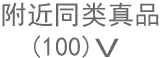
<style>
.page{position:relative;width:161px;height:58px;background:#ffffff}
.page>*{position:absolute;margin:0}
.t1{font:26.6px "SimHei";color:#686868;text-transform:uppercase}
.t2{font:26.7px "004-CAI978";color:#686868;text-transform:uppercase;scale:2 1}
</style>
<div class="page">
<p class="t1" style="left:2px;top:2px;width:157px;height:56px;text-align:center">附近同类真品<br>(100)</p>
<p class="t2" style="left:95px;top:38px;width:24px;height:19px">V</p>
</div>
